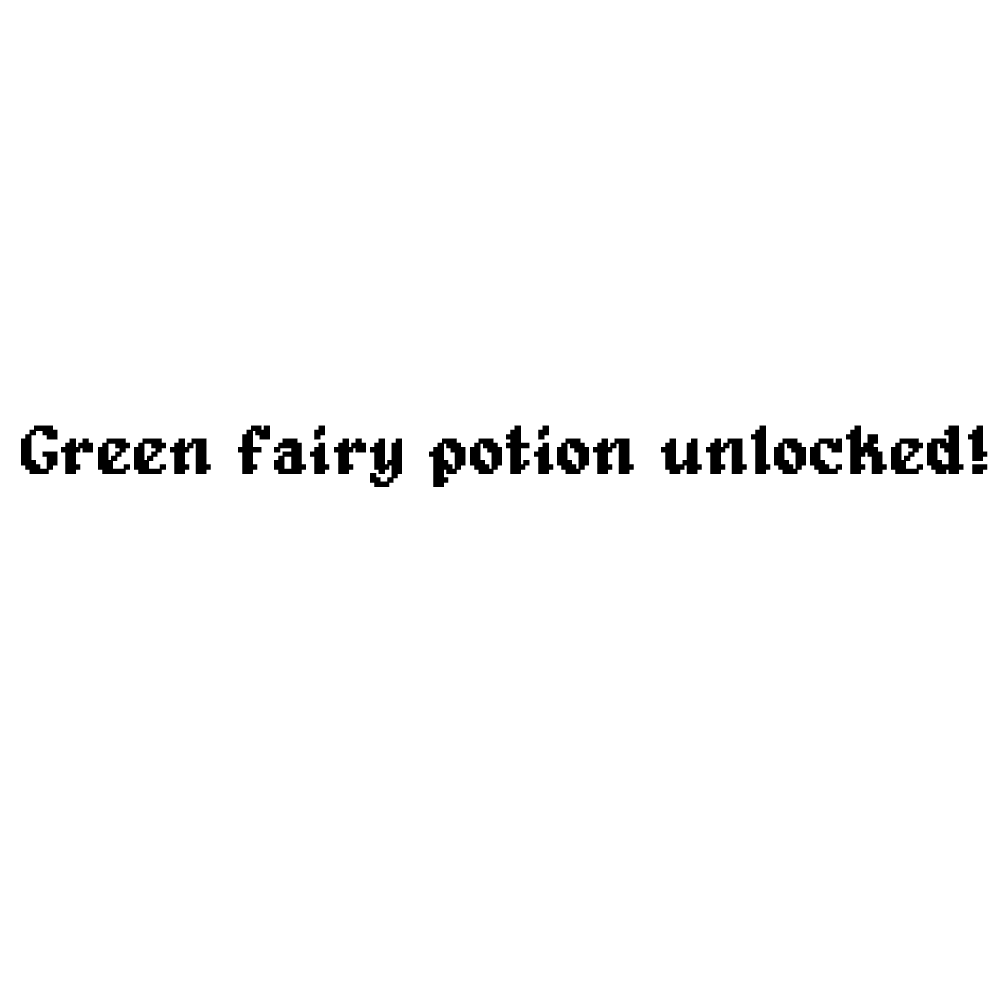
<style>
.page{position:relative;width:1000px;height:1000px;background:#ffffff}
.page>*{position:absolute;margin:0}
.t1{font:68.9px "Alagard";color:#000000;font-weight:bold}
</style>
<div class="page">
<p class="t1" style="left:21px;top:425px;width:967px;height:62px">Green fairy potion unlocked!</p>
</div>
